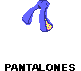
<style>
.page{position:relative;width:81px;height:71px;background:#ffffff}
.page>*{position:absolute;margin:0}
.t1{font:10.3px "Arial-BoldMT";color:#000000;scale:1.11 1}
</style>
<div class="page">
<p class="t1" style="left:5px;top:64px;width:70px;height:7px">PANTALONES</p>
</div>
